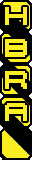
<style>
.page{position:relative;width:32px;height:192px;background:#000000}
.page>*{position:absolute;margin:0}
.t1{font:18px "04b20";color:#fcee21}
</style>
<div class="page">
<p class="t1" style="left:5px;top:7px;width:22px;height:18px">H</p>
<p class="t1" style="left:5px;top:39px;width:22px;height:18px">B</p>
<p class="t1" style="left:5px;top:71px;width:22px;height:18px">R</p>
<p class="t1" style="left:5px;top:103px;width:22px;height:18px">A</p>
</div>
